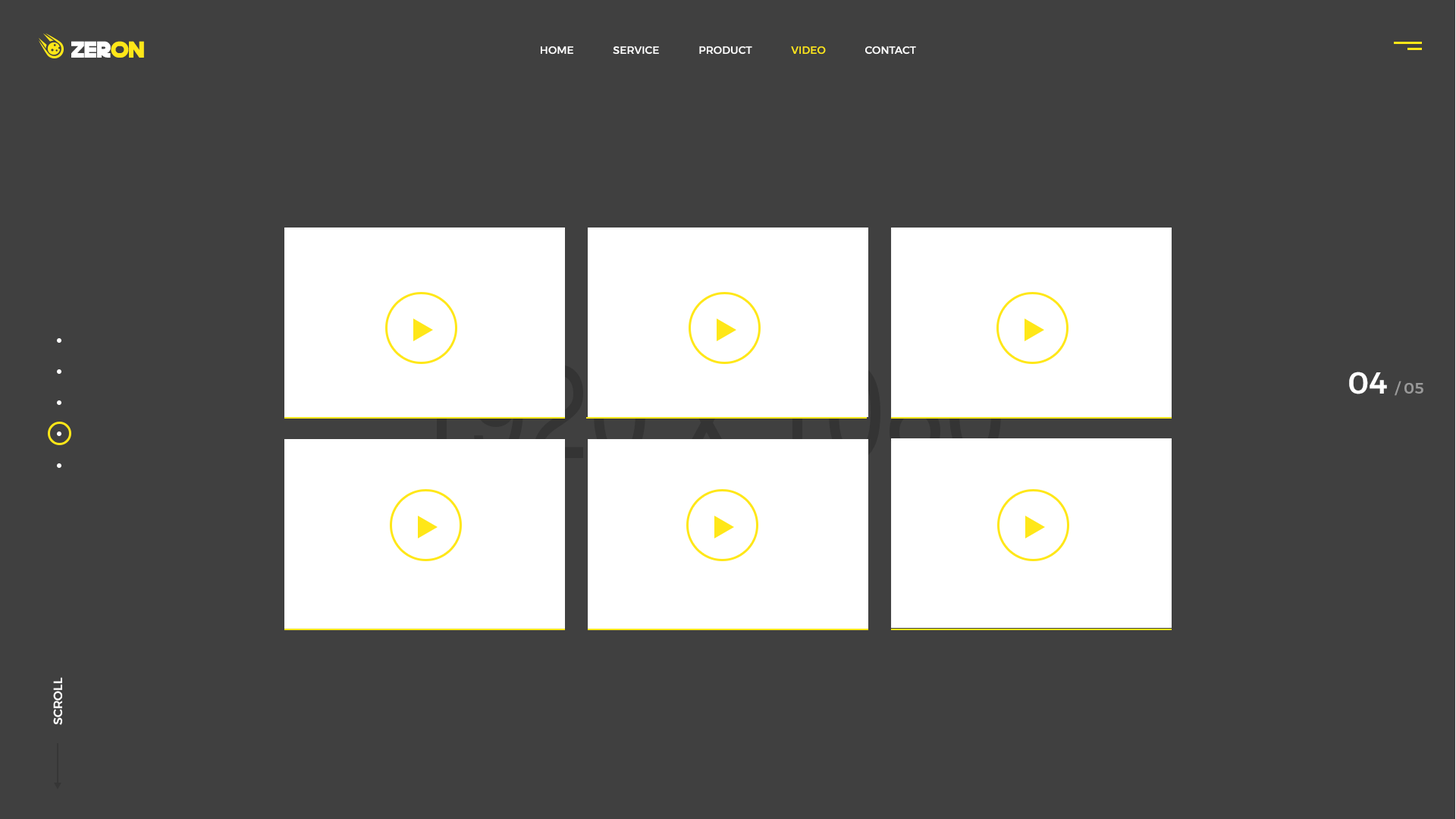
<style>
.page{position:relative;width:1456px;height:819px;background:#404040}
.page>*{position:absolute;margin:0}
.t1{font:22.7px "DeathStar";letter-spacing:0.001em;color:#ffffff}
.t2{font:22.7px "DeathStar";letter-spacing:0.001em;color:#ffe718}
.t3{font:10.6px "Montserrat-Medium";letter-spacing:0.001em;color:#ffffff}
.t4{font:10.6px "Montserrat-Medium";letter-spacing:0.001em;color:#ffe718}
.t5{font:15.2px "Montserrat-Medium";letter-spacing:0.001em;color:#9a9a9a}
.t6{font:30.3px "Montserrat-Medium";letter-spacing:0.001em;color:#ffffff}
.t7{font:12.1px "Montserrat-Medium";letter-spacing:0.001em;color:#ffffff}
</style>
<div class="page">
<p class="t1" style="left:71px;top:41px;width:73px;height:17px">zer<span class="t2">on</span></p>
<p class="t3" style="left:541px;top:46px;width:375px;height:9px">HOME               SERVICE               PRODUCT               <span class="t4">VIDEO</span>               CONTACT</p>
<p class="t5" style="left:1349px;top:372px;width:74px;height:24px"><span class="t6">04 </span>/ 05</p>
<p class="t7" style="left:53px;top:677px;width:10px;height:48px;rotate:-90deg">SCROLL</p>
</div>
